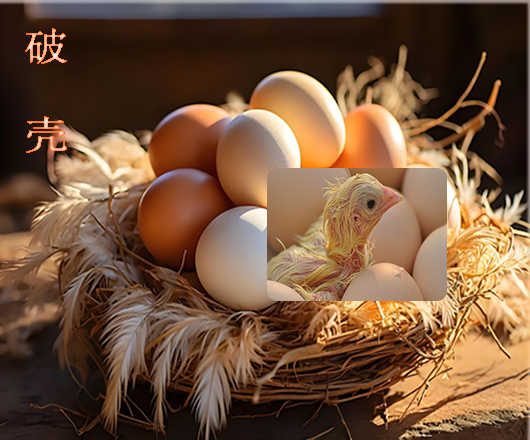
<style>
.page{position:relative;width:530px;height:440px}
.page>*{position:absolute;margin:0}
.t1{font:39px "SimSun";letter-spacing:0.002em;text-transform:uppercase;font-weight:bold;scale:1.14 1}
</style>
<div class="page">
<p class="t1" style="left:25px;top:28px;width:42px;height:125px;text-align:center">破壳</p>
</div>
